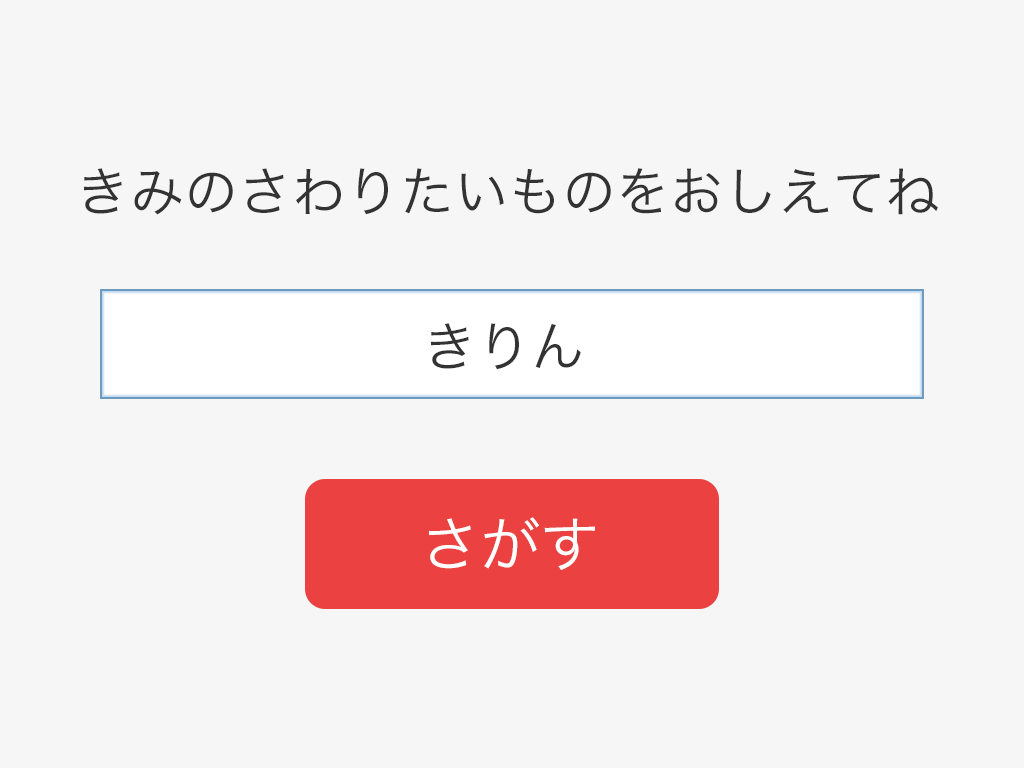
<style>
.page{position:relative;width:1024px;height:768px;background:#f6f6f6}
.page>*{position:absolute;margin:0}
.t1{font:54px "HiraKakuPro-W3";color:#333333}
.t2{font:60px "HiraKakuPro-W3";color:#ffffff}
</style>
<div class="page">
<p class="t1" style="left:84px;top:168px;width:854px;height:47px">きみのさわりたいものをおしえてね</p>
<p class="t1" style="left:431px;top:323px;width:150px;height:47px">きりん</p>
<p class="t2" style="left:429px;top:517px;width:166px;height:53px">さがす</p>
</div>
